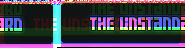
<style>
.page{position:relative;width:185px;height:48px}
.page>*{position:absolute;margin:0}
.t1{font:32px "Power-Grid"}
</style>
<div class="page">
<p class="t1" style="left:33px;top:18px;width:117px;height:13px">the unstandard</p>
</div>
